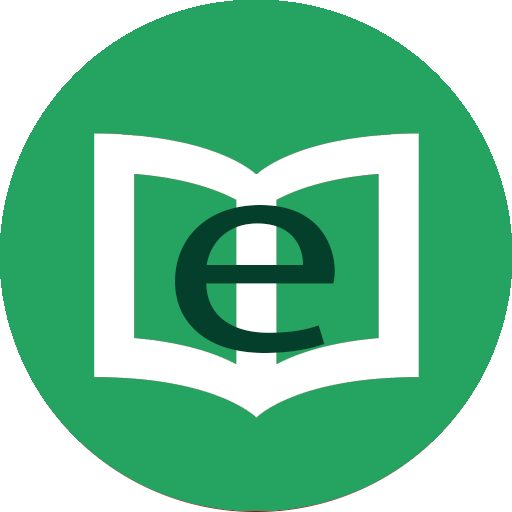
<style>
.page{position:relative;width:512px;height:512px;background:#25a360}
.page>*{position:absolute;margin:0}
.t1{font:293.5px "MyriadHebrew-Regular";color:#033f2b;scale:1.27 1}
</style>
<div class="page">
<p class="t1" style="left:175px;top:205px;width:160px;height:148px">e</p>
</div>
